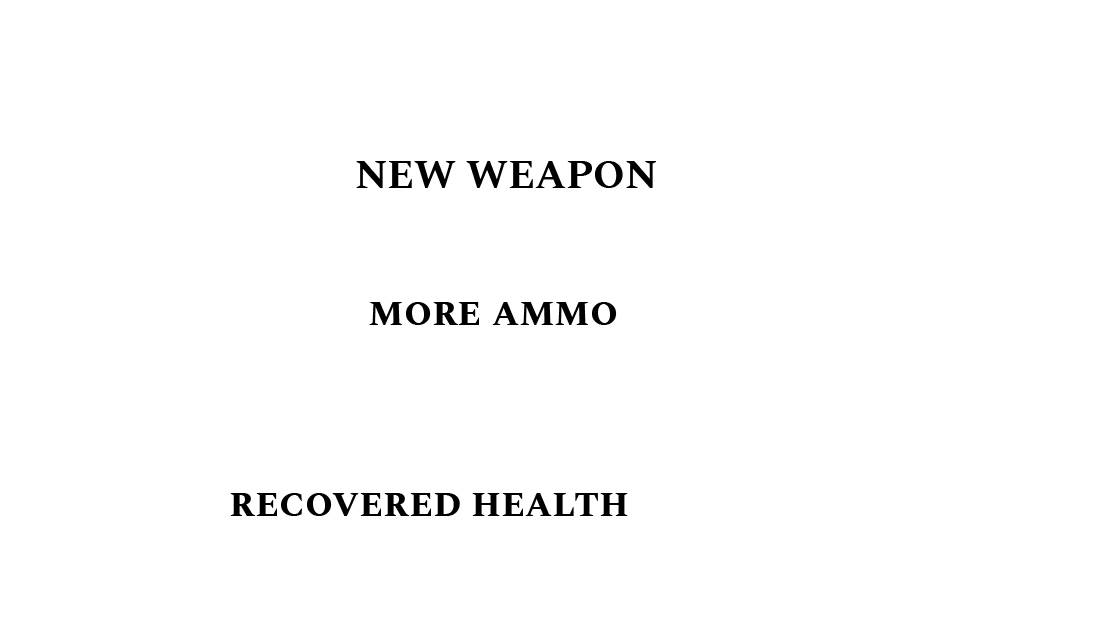
<style>
.page{position:relative;width:1119px;height:623px;background:#ffffff}
.page>*{position:absolute;margin:0}
.t1{font:40px "SpectralSC-Bold";color:#000000}
</style>
<div class="page">
<p class="t1" style="left:356px;top:161px;width:300px;height:27px">NEW WEAPON</p>
<p class="t1" style="left:369px;top:302px;width:248px;height:23px">more ammo</p>
<p class="t1" style="left:230px;top:493px;width:398px;height:23px">recovered health</p>
</div>
